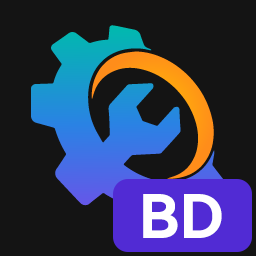
<style>
.page{position:relative;width:256px;height:256px;background:#141414}
.page>*{position:absolute;margin:0}
.t1{font:60px "HarmonyOS_Sans_SC_Bold";color:#ffffff}
</style>
<div class="page">
<p class="t1" style="left:143px;top:194px;width:79px;height:44px">BD</p>
</div>
